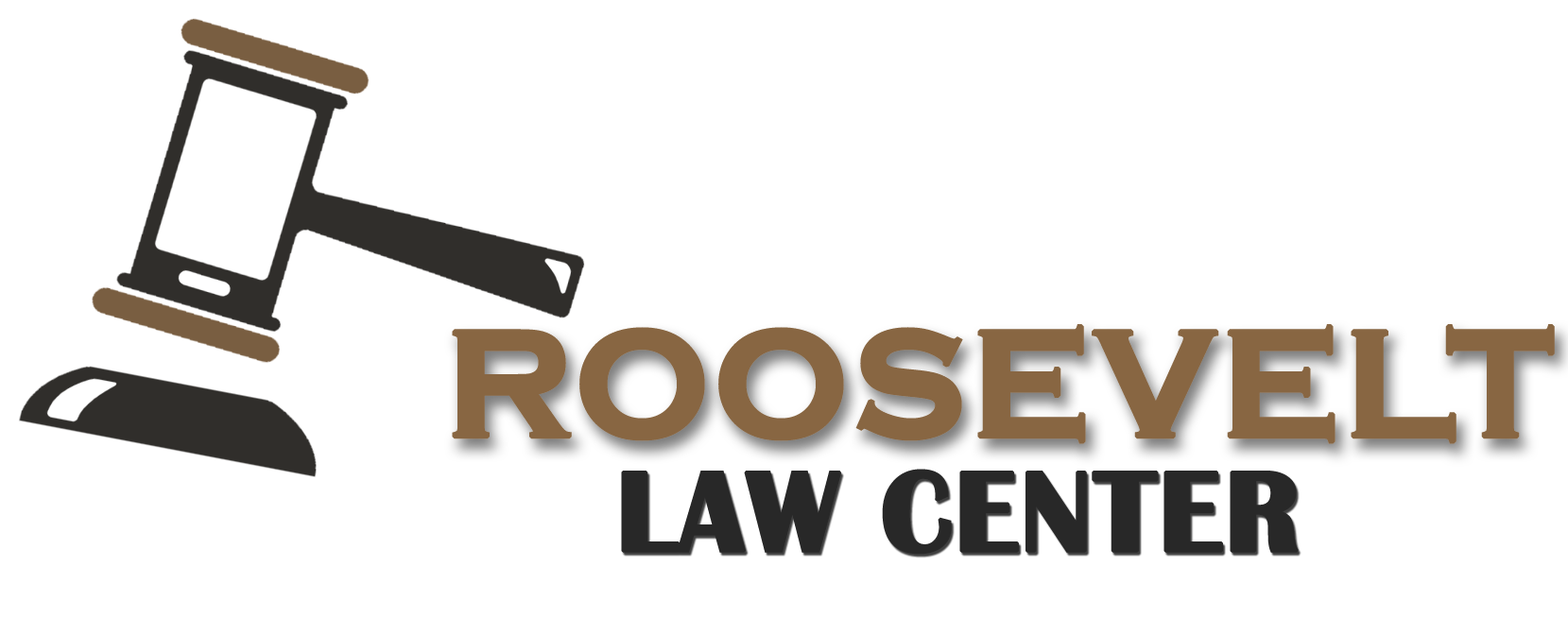
<style>
.page{position:relative;width:1568px;height:635px;background:#ffffff}
.page>*{position:absolute;margin:0}
.t1{font:157.5px "CopperplateGothic-Bold";color:#886642;font-weight:bold}
.t2{font:118.1px "BritannicBold";color:#282828;font-weight:bold}
</style>
<div class="page">
<p class="t1" style="left:452px;top:324px;width:1103px;height:120px">ROOSEVELT</p>
<p class="t2" style="left:621px;top:469px;width:678px;height:86px">LAW CENTER</p>
</div>
